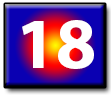
<style>
.page{position:relative;width:111px;height:96px;background:#ffffff}
.page>*{position:absolute;margin:0}
.t1{font:72px "MyriadPro-Bold";color:#ffffff}
</style>
<div class="page">
<p class="t1" style="left:22px;top:20px;width:72px;height:49px">18</p>
</div>
